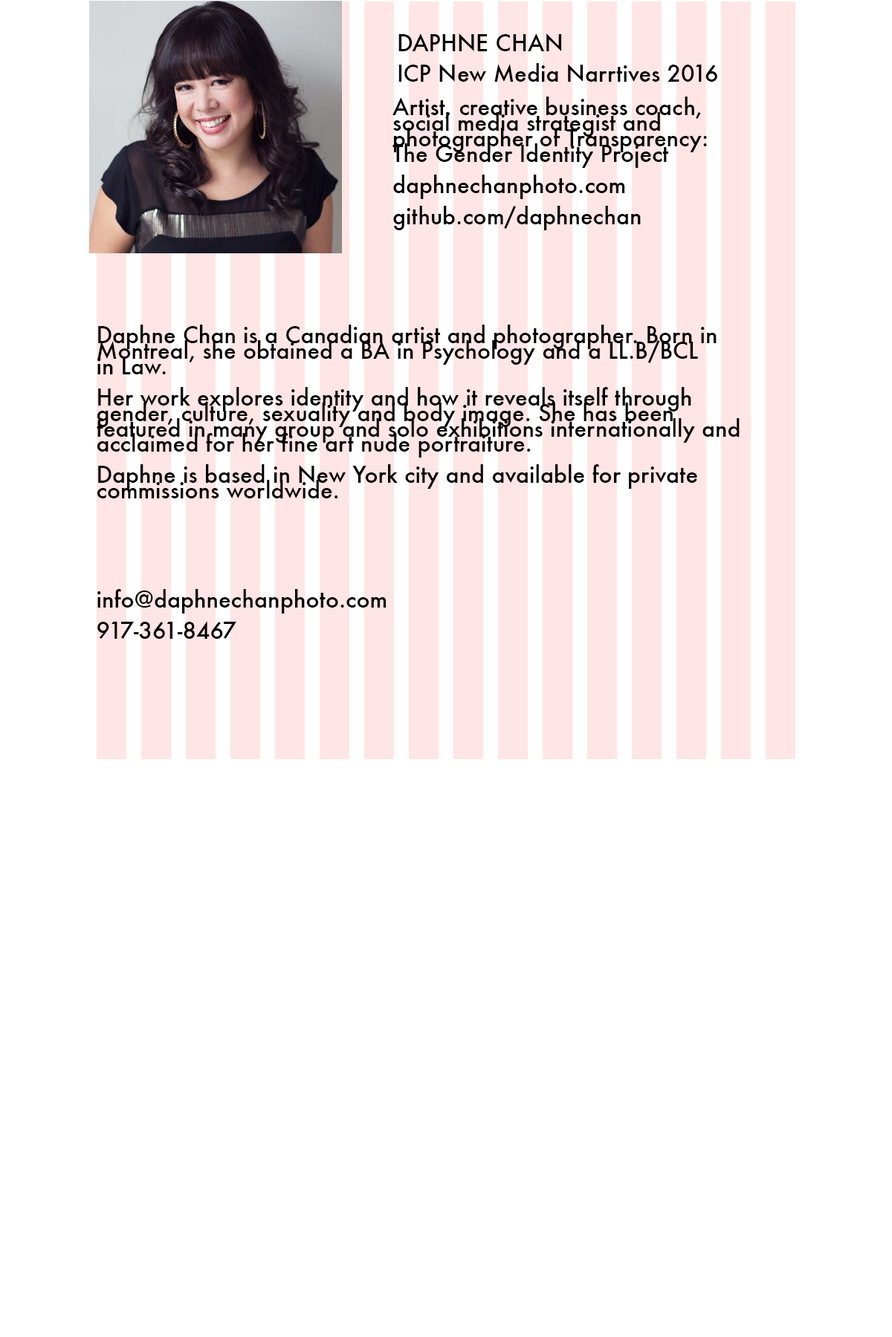
<style>
.page{position:relative;width:892px;height:1337px;background:#ffffff}
.page>*{position:absolute;margin:0}
.t1{font:22.3px/15.6px "Futura-Medium";color:#000000}
</style>
<div class="page">
<p class="t1" style="left:398px;top:33px;width:319px;height:49px">DAPHNE CHAN<br><br>ICP New Media Narrtives 2016</p>
<p class="t1" style="left:392px;top:97px;width:315px;height:133px">Artist, creative business coach, <br>social media strategist and <br>photographer of Transparency: <br>The Gender Identity Project<br><br>daphnechanphoto.com<br><br>github.com/daphnechan</p>
<p class="t1" style="left:97px;top:325px;width:642px;height:314px">Daphne Chan is a Canadian artist and photographer. Born in <br>Montreal, she obtained a BA in Psychology and a LL.B/BCL<br>in Law. <br><br>Her work explores identity and how it reveals itself through<br>gender, culture, sexuality and body image. She has been <br>featured in many group and solo exhibitions internationally and<br>acclaimed for her fine art nude portraiture.<br><br>Daphne is based in New York city and available for private<br>commissions worldwide.<br><br><br><br><br><br><br>info@daphnechanphoto.com<br><br>917-361-8467</p>
</div>
